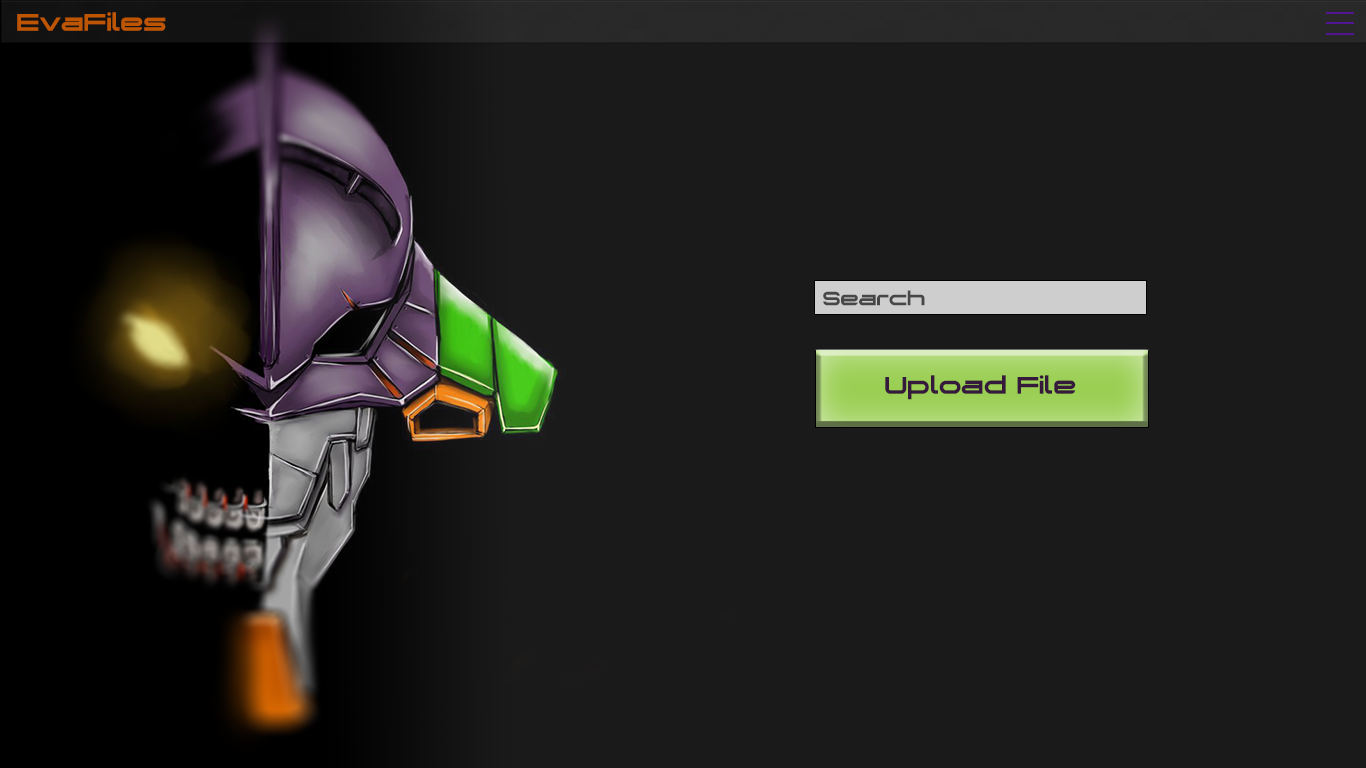
<style>
.page{position:relative;width:1366px;height:768px;background:#1a1a1a}
.page>*{position:absolute;margin:0}
.t1{font:30px "Genesys";color:#bd5502}
.t2{font:24px "Genesys";color:#474747}
.t3{font:30px "Genesys";color:#361a3b}
</style>
<div class="page">
<p class="t1" style="left:17px;top:12px;width:149px;height:19px">EvaFiles</p>
<p class="t2" style="left:823px;top:290px;width:102px;height:16px">Search</p>
<p class="t3" style="left:885px;top:375px;width:191px;height:25px">Upload File</p>
</div>
